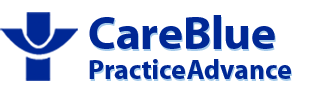
<style>
.page{position:relative;width:309px;height:85px;background:#ffffff}
.page>*{position:absolute;margin:0}
.t1{font:47.2px "Myriad-Bold";color:#002896}
.t2{font:27.8px "Myriad-Bold";color:#002896}
</style>
<div class="page">
<p class="t1" style="left:89px;top:15px;width:186px;height:34px">CareBlue</p>
<p class="t2" style="left:89px;top:59px;width:202px;height:20px">PracticeAdvance</p>
</div>
